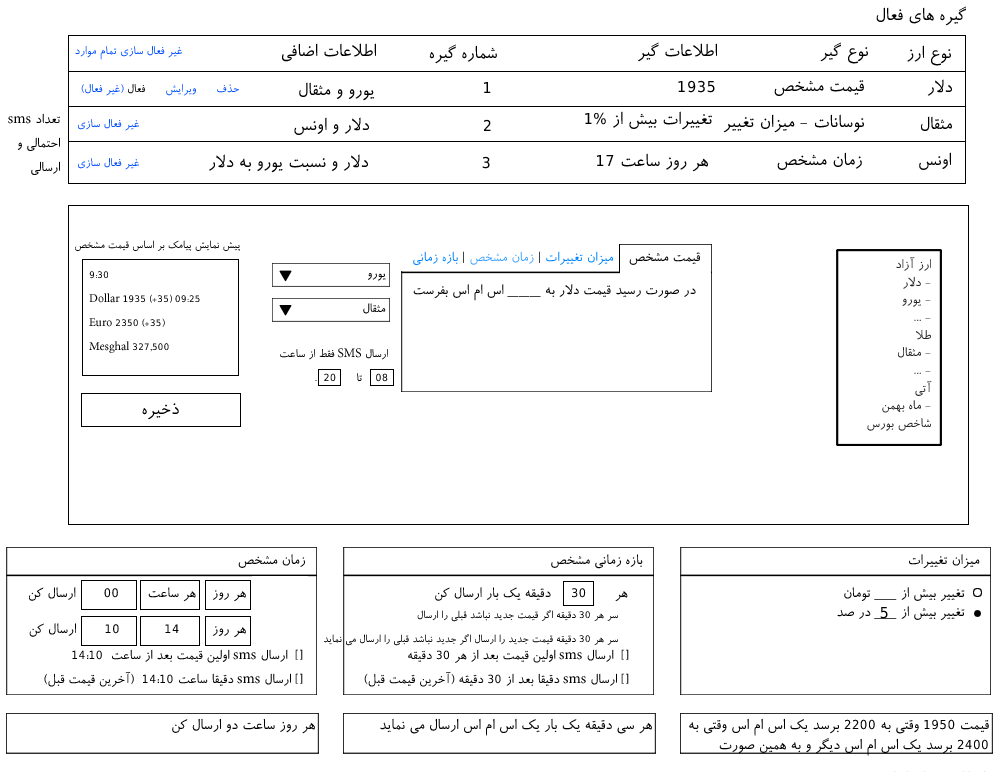
<style>
.page{position:relative;width:1000px;height:772px;background:#ffffff}
.page>*{position:absolute;margin:0}
.t1{font:20px "Roya";color:#000000}
.t2{font:13px "Roya";color:#004eff}
.t3{font:13px "Roya";color:#000000}
.t4{font:15px/24px "Roya";color:#000000}
.t5{font:12px "Roya";color:#000000}
.t6{font:15px "Roya";color:#0084ff}
.t7{font:15px "Roya";color:#000000}
.t8{font:15px "Roya";color:#44a5ff}
.t9{font:15.8px "Roya";color:#000000}
.t10{font:14.7px/17.7px "Roya";color:#262626}
.t11{font:12px/24px "Roya";color:#000000}
.t12{font:14px "Roya";color:#000000}
.t13{font:13px/24px "Roya";color:#000000}
.t14{font:15.8px/18.9px "Roya";color:#000000}
.t15{font:16.5px "Roya";color:#000000}
.t16{font:16.5px/19.9px "Roya";color:#000000}
.t17{font:15px/24px "Roya"}
</style>
<div class="page">
<p class="t1" style="left:876px;top:6px;width:90px;height:20px">گیره های فعال</p>
<p class="t2" style="left:75px;top:46px;width:107px;height:14px">غیر فعال سازی تمام موارد</p>
<p class="t1" style="left:282px;top:43px;width:94px;height:19px">اطلاعات اضافی</p>
<p class="t1" style="left:429px;top:44px;width:68px;height:20px">شماره گیره</p>
<p class="t1" style="left:638px;top:42px;width:79px;height:20px">اطلاعات گیر</p>
<p class="t1" style="left:820px;top:42px;width:48px;height:22px">نوع گیر</p>
<p class="t1" style="left:907px;top:45px;width:44px;height:21px">نوع ارز</p>
<p class="t2" style="left:81px;top:84px;width:158px;height:12px">حذف      ویرایش      <span class="t3">فعال </span>(غیر فعال)</p>
<p class="t1" style="left:299px;top:82px;width:76px;height:19px">یورو و مثقال</p>
<p class="t1" style="left:484px;top:82px;width:7px;height:11px">1</p>
<p class="t1" style="left:678px;top:80px;width:37px;height:13px">1935</p>
<p class="t1" style="left:774px;top:80px;width:90px;height:16px">قیمت مشخص</p>
<p class="t1" style="left:927px;top:79px;width:25px;height:17px">دلار</p>
<p class="t4" style="left:8px;top:113px;width:52px;height:62px">تعداد sms<br>احتمالی و <br>ارسالی</p>
<p class="t1" style="left:585px;top:111px;width:127px;height:19px">تغییرات بیش از 1%</p>
<p class="t2" style="left:78px;top:119px;width:61px;height:12px">غیر فعال سازی</p>
<p class="t1" style="left:294px;top:117px;width:75px;height:18px">دلار و اونس</p>
<p class="t1" style="left:484px;top:119px;width:7px;height:12px">2</p>
<p class="t1" style="left:723px;top:114px;width:141px;height:19px">نوسانات - میزان تغییر</p>
<p class="t1" style="left:921px;top:116px;width:31px;height:15px">مثقال</p>
<p class="t2" style="left:78px;top:158px;width:61px;height:12px">غیر فعال سازی</p>
<p class="t1" style="left:209px;top:154px;width:159px;height:19px">دلار و نسبت یورو به دلار</p>
<p class="t1" style="left:482px;top:156px;width:8px;height:13px">3</p>
<p class="t1" style="left:597px;top:153px;width:111px;height:19px">هر روز ساعت 17</p>
<p class="t1" style="left:777px;top:152px;width:85px;height:18px">زمان مشخص</p>
<p class="t1" style="left:919px;top:152px;width:32px;height:18px">اونس</p>
<p class="t5" style="left:75px;top:240px;width:165px;height:11px">پیش نمایش پیامک بر اساس قیمت مشخص</p>
<p class="t6" style="left:413px;top:251px;width:200px;height:14px">میزان تغییرات<span class="t7"> | </span><span class="t8">زمان مشخص</span><span class="t7"> | </span>بازه زمانی</p>
<p class="t9" style="left:629px;top:252px;width:71px;height:13px">قیمت مشخص</p>
<p class="t10" style="left:867px;top:257px;width:65px;height:174px">ارز آزاد<br>- دلار<br>- یورو<br>- ...<br>طلا<br>- مثقال<br>- ...<br>آتی<br>- ماه بهمن<br>شاخص بورس</p>
<p class="t11" style="left:89px;top:271px;width:111px;height:82px">9:30<br>Dollar 1935 (+35) 09:25<br>Euro 2350 (+35)<br>Mesghal 327,500</p>
<p class="t12" style="left:368px;top:273px;width:18px;height:8px">یورو</p>
<p class="t9" style="left:413px;top:284px;width:283px;height:17px">در صورت رسید قیمت دلار به ______ اس ام اس بفرست</p>
<p class="t12" style="left:363px;top:303px;width:23px;height:11px">مثقال</p>
<p class="t13" style="left:280px;top:348px;width:108px;height:34px">ارسال SMS فقط از ساعت<br>08    تا      20  .</p>
<p class="t1" style="left:142px;top:403px;width:37px;height:17px">ذخیره</p>
<p class="t9" style="left:238px;top:554px;width:67px;height:14px">زمان مشخص</p>
<p class="t9" style="left:551px;top:554px;width:92px;height:15px">بازه زمانی مشخص</p>
<p class="t9" style="left:909px;top:554px;width:71px;height:15px">میزان تغییرات</p>
<p class="t9" style="left:29px;top:587px;width:217px;height:15px">هر روز    هر ساعت       00       ارسال کن</p>
<p class="t9" style="left:435px;top:587px;width:193px;height:15px">هر       30     دقیقه یک بار ارسال کن</p>
<p class="t14" style="left:837px;top:587px;width:128px;height:34px">تغییر بیش از ____ تومان<br>تغییر بیش از ____ در صد</p>
<p class="t11" style="left:324px;top:610px;width:294px;height:36px">سر هر 30 دقیقه اگر قیمت جدید نباشد قبلی را ارسال<br>سر هر 30 دقیقه قیمت جدید را ارسال اگر جدید نباشد قبلی را ارسال می نماید</p>
<p class="t1" style="left:880px;top:607px;width:8px;height:12px">5</p>
<p class="t9" style="left:29px;top:623px;width:217px;height:15px">هر روز        14           10       ارسال کن</p>
<p class="t4" style="left:44px;top:649px;width:259px;height:38px">[]  ارسال sms اولین قیمت بعد از ساعت  14:10<br>[] ارسال sms دقیقا ساعت 14:10  (آخرین قیمت قبل)</p>
<p class="t4" style="left:364px;top:649px;width:265px;height:38px">[]  ارسال sms اولین قیمت بعد از هر 30 دقیقه<br>[] ارسال sms دقیقا بعد از 30 دقیقه (آخرین قیمت قبل)</p>
<p class="t15" style="left:172px;top:718px;width:143px;height:16px">هر روز ساعت دو ارسال کن</p>
<p class="t15" style="left:380px;top:718px;width:272px;height:18px">هر سی دقیقه یک بار یک اس ام اس ارسال می نماید</p>
<p class="t16" style="left:689px;top:718px;width:300px;height:38px">قیمت 1950 وقتی به 2200 برسد یک اس ام اس وقتی به<br>2400 برسد یک اس ام اس دیگر و به همین صورت</p>
<p class="t17" style="left:894px;top:771px;width:91px;height:1px">امکاناتی که باید اضافه شود<br>تعداد sms احتمالی<br>توضیحات بهتر</p>
</div>
